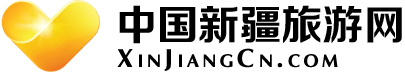
<style>
.page{position:relative;width:405px;height:72px;background:#ffffff}
.page>*{position:absolute;margin:0}
.t1{font:41.3px "FZZCHJW--GB1-0";color:#000000}
.t2{font:26px "FZKANGJW--GB1-0";letter-spacing:0.18em;color:#000000;font-variant:small-caps}
</style>
<div class="page">
<p class="t1" style="left:119px;top:5px;width:283px;height:39px">中国新疆旅游网</p>
<p class="t2" style="left:117px;top:48px;width:221px;height:23px">XinJiangCn.com</p>
</div>
